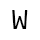
<style>
.page{position:relative;width:40px;height:40px;background:#ffffff}
.page>*{position:absolute;margin:0}
.t1{font:30px "Consolas";color:#000000}
</style>
<div class="page">
<p class="t1" style="left:12px;top:10px;width:16px;height:19px">W</p>
</div>
